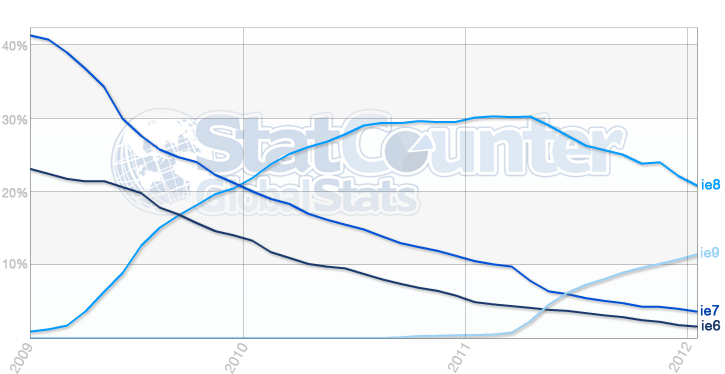
<style>
.page{position:relative;width:725px;height:374px;background:#f6f6f6}
.page>*{position:absolute;margin:0}
.t1{font:12px "HelveticaNeue";color:#c3c3c4;font-weight:bold}
.t2{font:14px "HelveticaNeue";color:#019cff;font-weight:bold}
.t3{font:14px "HelveticaNeue";color:#9ad2f5;font-weight:bold}
.t4{font:14px "HelveticaNeue";color:#0041ac;font-weight:bold}
.t5{font:14px "HelveticaNeue";color:#1a3a6e;font-weight:bold}
.t6{font:14px "HelveticaNeue";color:#c3c3c4;font-weight:bold}
</style>
<div class="page">
<p class="t1" style="left:2px;top:41px;width:26px;height:10px">40%</p>
<p class="t1" style="left:2px;top:115px;width:26px;height:10px">30%</p>
<p class="t2" style="left:701px;top:179px;width:20px;height:11px">ie8</p>
<p class="t1" style="left:2px;top:188px;width:26px;height:10px">20%</p>
<p class="t3" style="left:700px;top:247px;width:20px;height:11px">ie9</p>
<p class="t1" style="left:2px;top:259px;width:26px;height:10px">10%</p>
<p class="t4" style="left:700px;top:305px;width:20px;height:11px">ie7</p>
<p class="t5" style="left:701px;top:320px;width:20px;height:11px">ie6</p>
<p class="t6" style="left:9px;top:342px;width:24px;height:32px;rotate:-60deg">2009</p>
<p class="t6" style="left:224px;top:342px;width:24px;height:32px;rotate:-60deg">2010</p>
<p class="t6" style="left:447px;top:342px;width:23px;height:31px;rotate:-60deg">2011</p>
<p class="t6" style="left:668px;top:341px;width:24px;height:32px;rotate:-60deg">2012</p>
</div>
